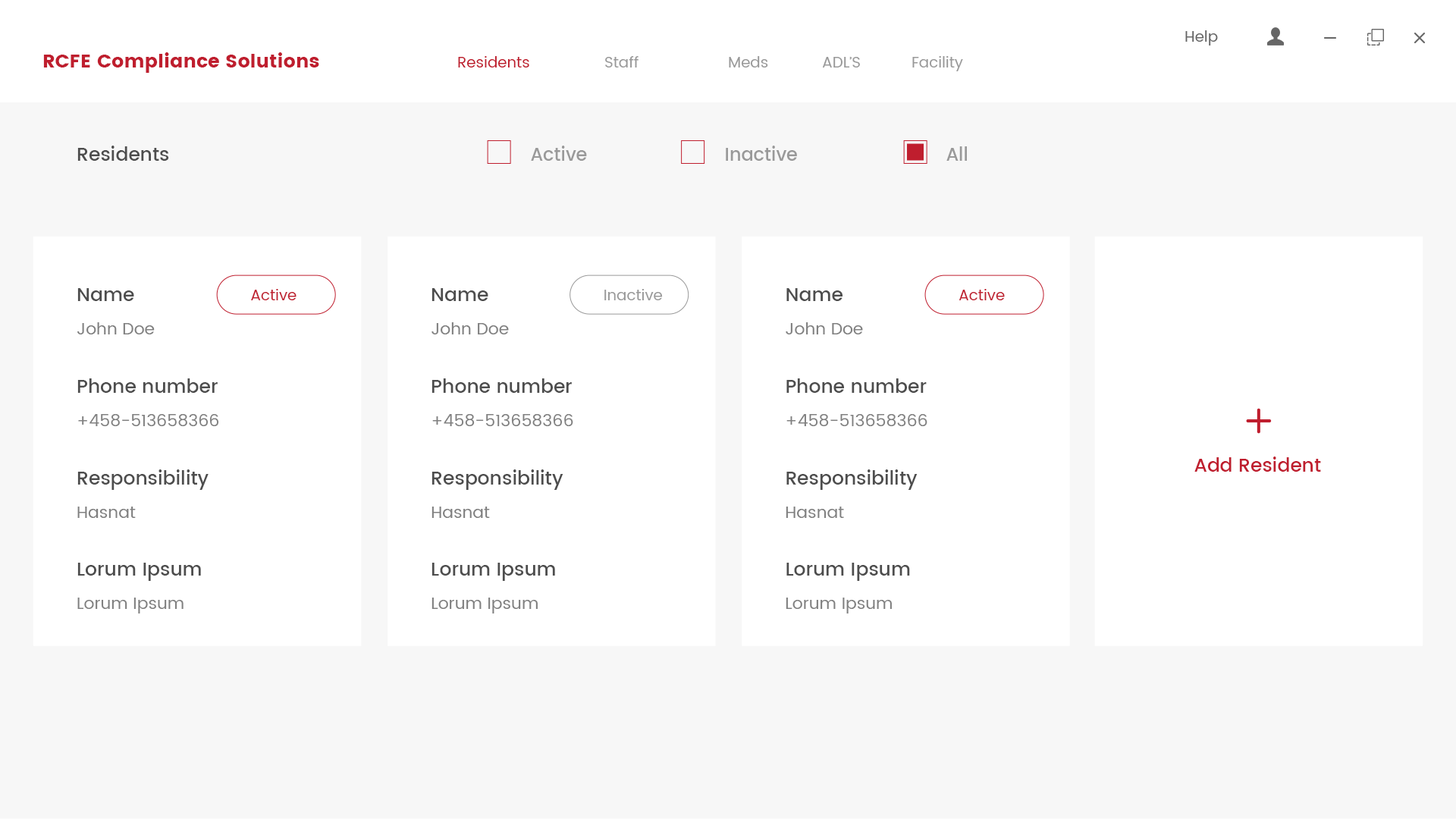
<style>
.page{position:relative;width:1456px;height:819px;background:#ffffff}
.page>*{position:absolute;margin:0}
.t1{font:15.2px "Poppins-Regular";color:#666666}
.t2{font:19px "Poppins-Bold";color:#bf1e2e}
.t3{font:15.2px "Poppins-Regular";color:#bf1e2e}
.t4{font:15.2px "Poppins-Regular";color:#999999}
.t5{font:19px "Poppins-Medium";color:#4d4d4d}
.t6{font:18.2px "Poppins-Medium";color:#999999}
.t7{font:16.7px "Poppins-Regular";color:#808080}
.t8{font:19px "Poppins-Medium";color:#bf1e2e}
</style>
<div class="page">
<p class="t1" style="left:1185px;top:30px;width:33px;height:15px">Help</p>
<p class="t2" style="left:43px;top:52px;width:276px;height:21px">RCFE Compliance Solutions</p>
<p class="t3" style="left:458px;top:56px;width:71px;height:11px">Residents</p>
<p class="t4" style="left:605px;top:56px;width:34px;height:11px">Staff</p>
<p class="t4" style="left:729px;top:56px;width:39px;height:11px">Meds</p>
<p class="t4" style="left:822px;top:57px;width:38px;height:10px">ADL’S</p>
<p class="t4" style="left:912px;top:56px;width:51px;height:15px">Facility</p>
<p class="t5" style="left:77px;top:146px;width:92px;height:15px">Residents</p>
<p class="t6" style="left:531px;top:146px;width:56px;height:15px">Active</p>
<p class="t6" style="left:726px;top:146px;width:71px;height:15px">Inactive</p>
<p class="t6" style="left:946px;top:146px;width:21px;height:15px">All</p>
<p class="t5" style="left:77px;top:288px;width:57px;height:13px">Name</p>
<p class="t3" style="left:251px;top:289px;width:46px;height:11px">Active</p>
<p class="t5" style="left:431px;top:288px;width:57px;height:13px">Name</p>
<p class="t4" style="left:604px;top:289px;width:59px;height:11px">Inactive</p>
<p class="t5" style="left:786px;top:288px;width:56px;height:13px">Name</p>
<p class="t3" style="left:959px;top:289px;width:46px;height:11px">Active</p>
<p class="t7" style="left:77px;top:322px;width:78px;height:12px">John Doe</p>
<p class="t7" style="left:431px;top:322px;width:78px;height:12px">John Doe</p>
<p class="t7" style="left:786px;top:322px;width:77px;height:12px">John Doe</p>
<p class="t5" style="left:77px;top:378px;width:141px;height:15px">Phone number</p>
<p class="t5" style="left:431px;top:378px;width:141px;height:15px">Phone number</p>
<p class="t5" style="left:786px;top:378px;width:141px;height:15px">Phone number</p>
<p class="t7" style="left:78px;top:414px;width:141px;height:12px">+458-513658366</p>
<p class="t7" style="left:432px;top:414px;width:141px;height:12px">+458-513658366</p>
<p class="t7" style="left:786px;top:414px;width:141px;height:12px">+458-513658366</p>
<p class="t8" style="left:1194px;top:457px;width:127px;height:15px">Add Resident</p>
<p class="t5" style="left:77px;top:469px;width:132px;height:21px">Responsibility</p>
<p class="t5" style="left:431px;top:469px;width:132px;height:21px">Responsibility</p>
<p class="t5" style="left:786px;top:469px;width:132px;height:21px">Responsibility</p>
<p class="t7" style="left:77px;top:507px;width:59px;height:11px">Hasnat</p>
<p class="t7" style="left:431px;top:507px;width:59px;height:11px">Hasnat</p>
<p class="t7" style="left:786px;top:507px;width:58px;height:11px">Hasnat</p>
<p class="t5" style="left:77px;top:563px;width:124px;height:18px">Lorum Ipsum</p>
<p class="t5" style="left:431px;top:563px;width:124px;height:18px">Lorum Ipsum</p>
<p class="t5" style="left:786px;top:563px;width:124px;height:18px">Lorum Ipsum</p>
<p class="t7" style="left:77px;top:598px;width:107px;height:15px">Lorum Ipsum</p>
<p class="t7" style="left:431px;top:598px;width:107px;height:15px">Lorum Ipsum</p>
<p class="t7" style="left:786px;top:598px;width:106px;height:15px">Lorum Ipsum</p>
</div>
